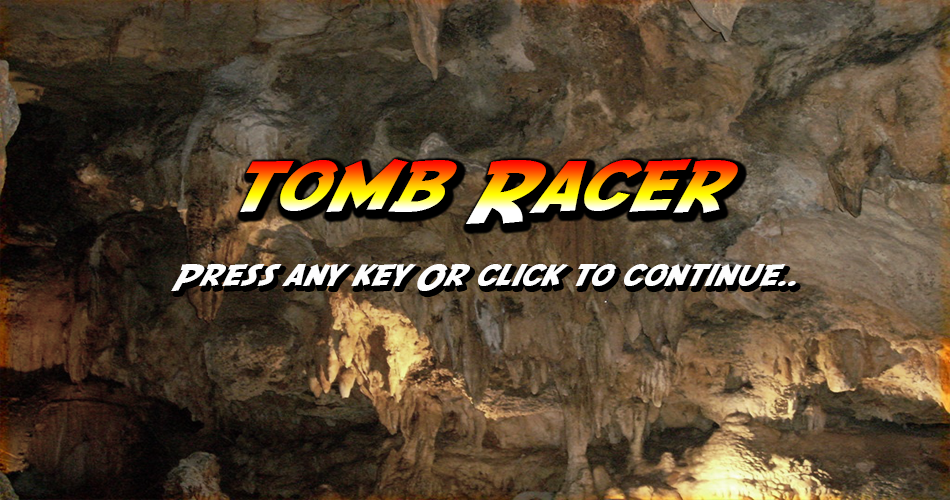
<style>
.page{position:relative;width:950px;height:500px}
.page>*{position:absolute;margin:0}
.t1{font:72px "SFFedora";letter-spacing:-0.005em;scale:1.2 1}
.t2{font:30px "SFFedora";letter-spacing:-0.005em;color:#fdfdfd;scale:1.2 1}
</style>
<div class="page">
<p class="t1" style="left:240px;top:159px;width:498px;height:65px">tomb Racer</p>
<p class="t2" style="left:171px;top:264px;width:625px;height:27px">Press any key Or click to continue..</p>
</div>
